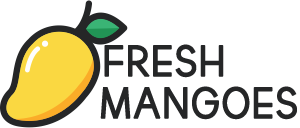
<style>
.page{position:relative;width:300px;height:128px;background:#ffffff}
.page>*{position:absolute;margin:0}
.t1{font:44px "thebrooklynbold";letter-spacing:0.025em;color:#252627;font-weight:bold}
</style>
<div class="page">
<p class="t1" style="left:104px;top:44px;width:120px;height:34px">FRESH</p>
<p class="t1" style="left:100px;top:86px;width:197px;height:34px">MANGOES</p>
</div>
